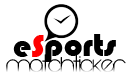
<style>
.page{position:relative;width:128px;height:76px;background:#ffffff}
.page>*{position:absolute;margin:0}
.t1{font:33.3px "Bauhaus93";color:#000000}
.t2{font:33.3px "Bauhaus93";color:#ff0000}
.t3{font:25px "VaguelyFatal";color:#000000}
</style>
<div class="page">
<p class="t1" style="left:13px;top:41px;width:18px;height:16px">e</p>
<p class="t2" style="left:32px;top:35px;width:12px;height:22px">S</p>
<p class="t1" style="left:45px;top:34px;width:71px;height:28px">ports</p>
<p class="t3" style="left:6px;top:54px;width:120px;height:19px">matchticker</p>
</div>
